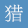
<style>
.page{position:relative;width:28px;height:28px;background:#5490c0}
.page>*{position:absolute;margin:0}
.t1{font:18px "FZBSJW--GB1-0";color:#f3f7f8}
</style>
<div class="page">
<p class="t1" style="left:5px;top:4px;width:18px;height:18px">猎</p>
</div>
